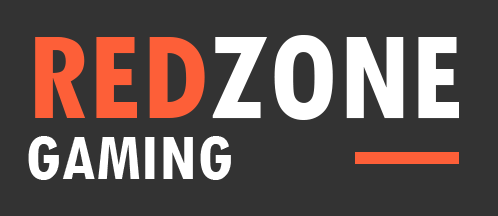
<style>
.page{position:relative;width:498px;height:216px;background:#333333}
.page>*{position:absolute;margin:0}
.t1{font:133px "TwCenMT-CondensedBold";color:#ffffff}
.t2{font:133px "TwCenMT-CondensedBold";color:#fd5f38}
.t3{font:69px "TwCenMT-CondensedBold";color:#ffffff}
</style>
<div class="page">
<p class="t1" style="left:35px;top:35px;width:424px;height:85px"><span class="t2">RED</span>ZONE</p>
<p class="t3" style="left:28px;top:136px;width:203px;height:44px">GAMING</p>
</div>
